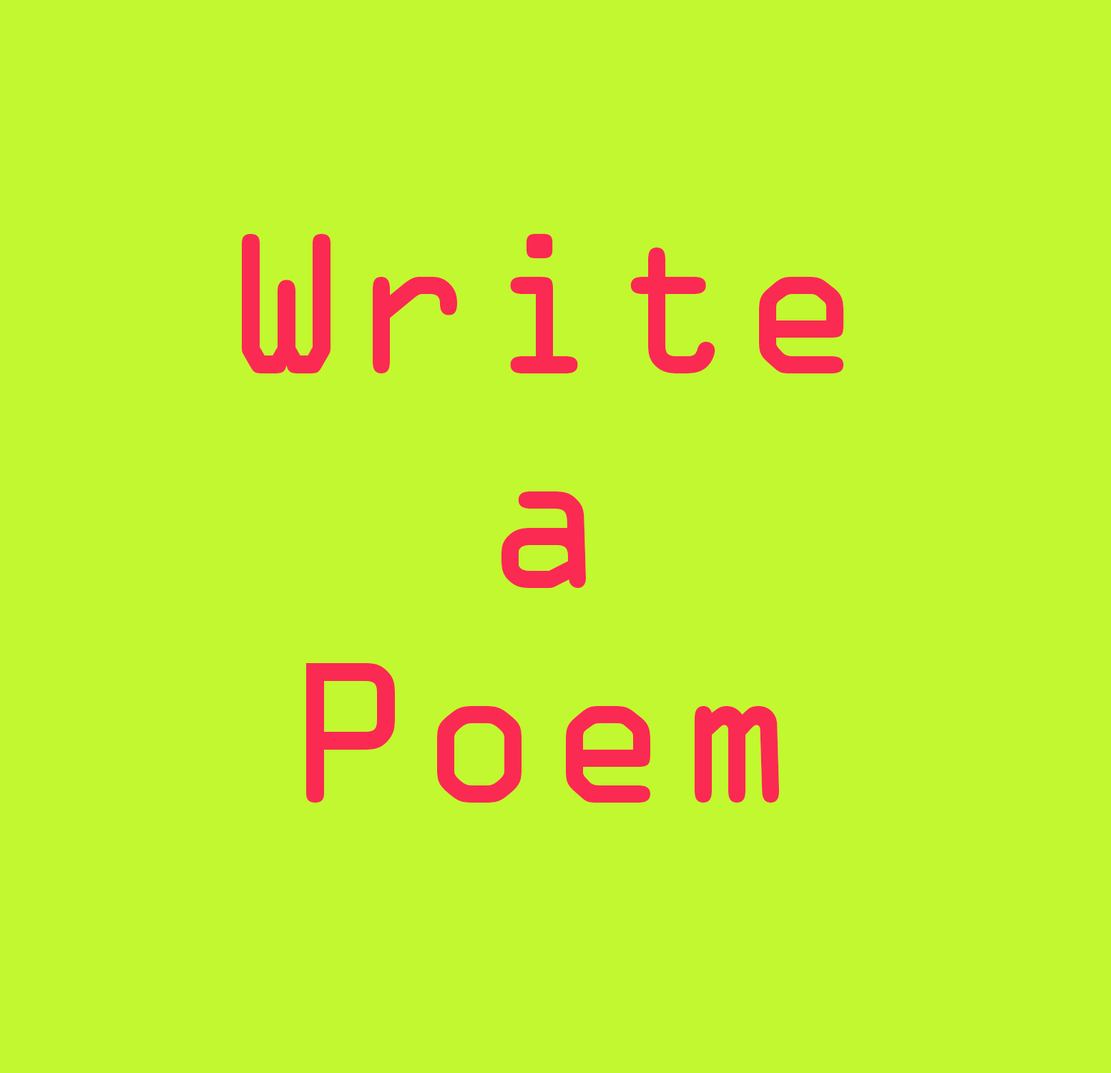
<style>
.page{position:relative;width:1111px;height:1073px;background:#c2f82f}
.page>*{position:absolute;margin:0}
.t1{font:178.9px "OCRAStd";color:#fa2a52}
</style>
<div class="page">
<p class="t1" style="left:242px;top:234px;width:602px;height:569px;text-align:center">Write<br>a<br>Poem</p>
</div>
